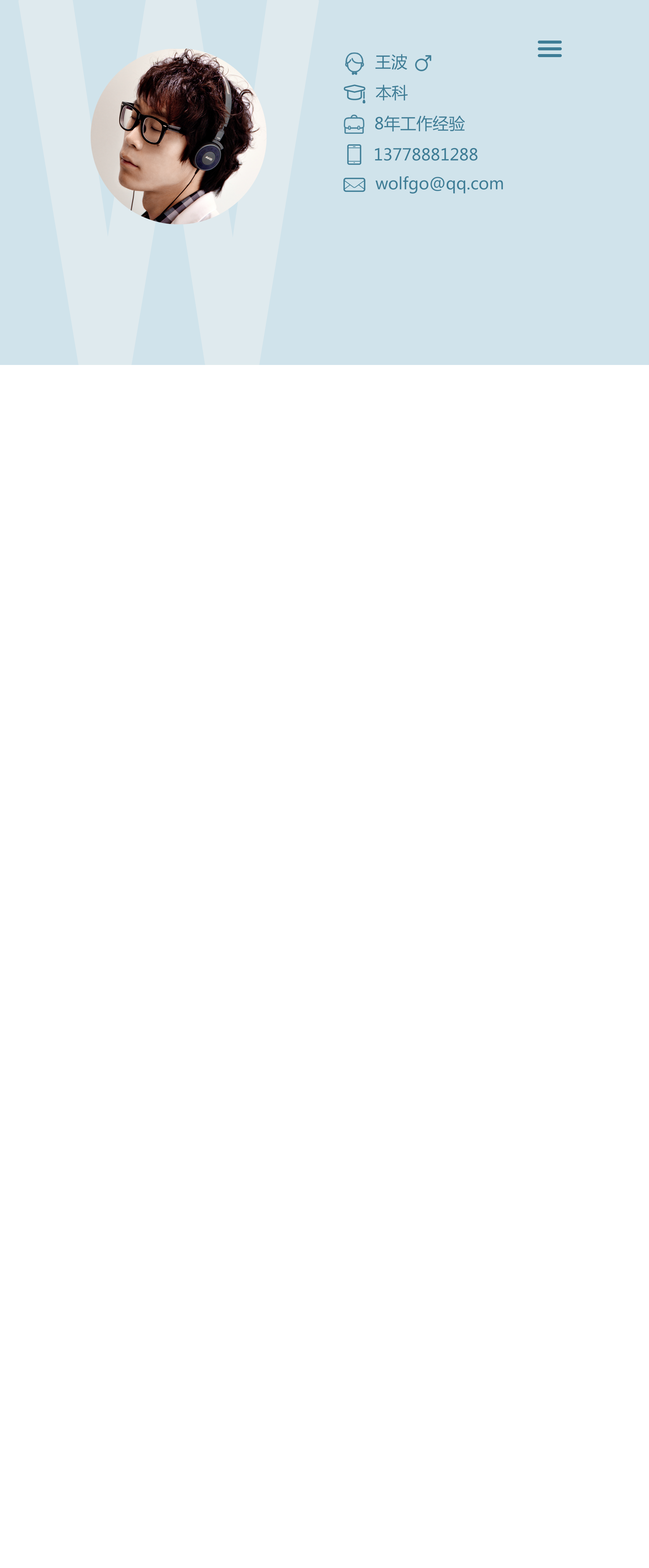
<style>
.page{position:relative;width:649px;height:1568px;background:#ffffff}
.page>*{position:absolute;margin:0}
.t1{font:16.2px "MicrosoftYaHei";color:#3e7d96}
</style>
<div class="page">
<p class="t1" style="left:375px;top:54px;width:32px;height:16px">王波</p>
<p class="t1" style="left:375px;top:84px;width:33px;height:17px">本科</p>
<p class="t1" style="left:375px;top:116px;width:90px;height:15px">8年工作经验</p>
<p class="t1" style="left:375px;top:148px;width:102px;height:13px">13778881288</p>
<p class="t1" style="left:375px;top:176px;width:128px;height:18px">wolfgo@qq.com</p>
</div>
